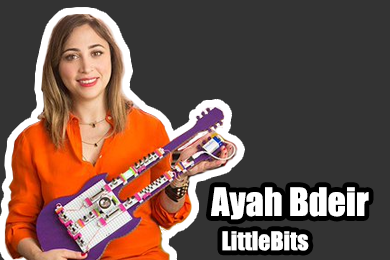
<style>
.page{position:relative;width:390px;height:260px;background:#333333}
.page>*{position:absolute;margin:0}
.t1{font:36px "Impact";color:#ffffff}
.t2{font:23.8px "Impact";color:#ffffff}
</style>
<div class="page">
<p class="t1" style="left:211px;top:187px;width:158px;height:33px">Ayah Bdeir</p>
<p class="t2" style="left:222px;top:231px;width:87px;height:20px">LittleBits</p>
</div>
